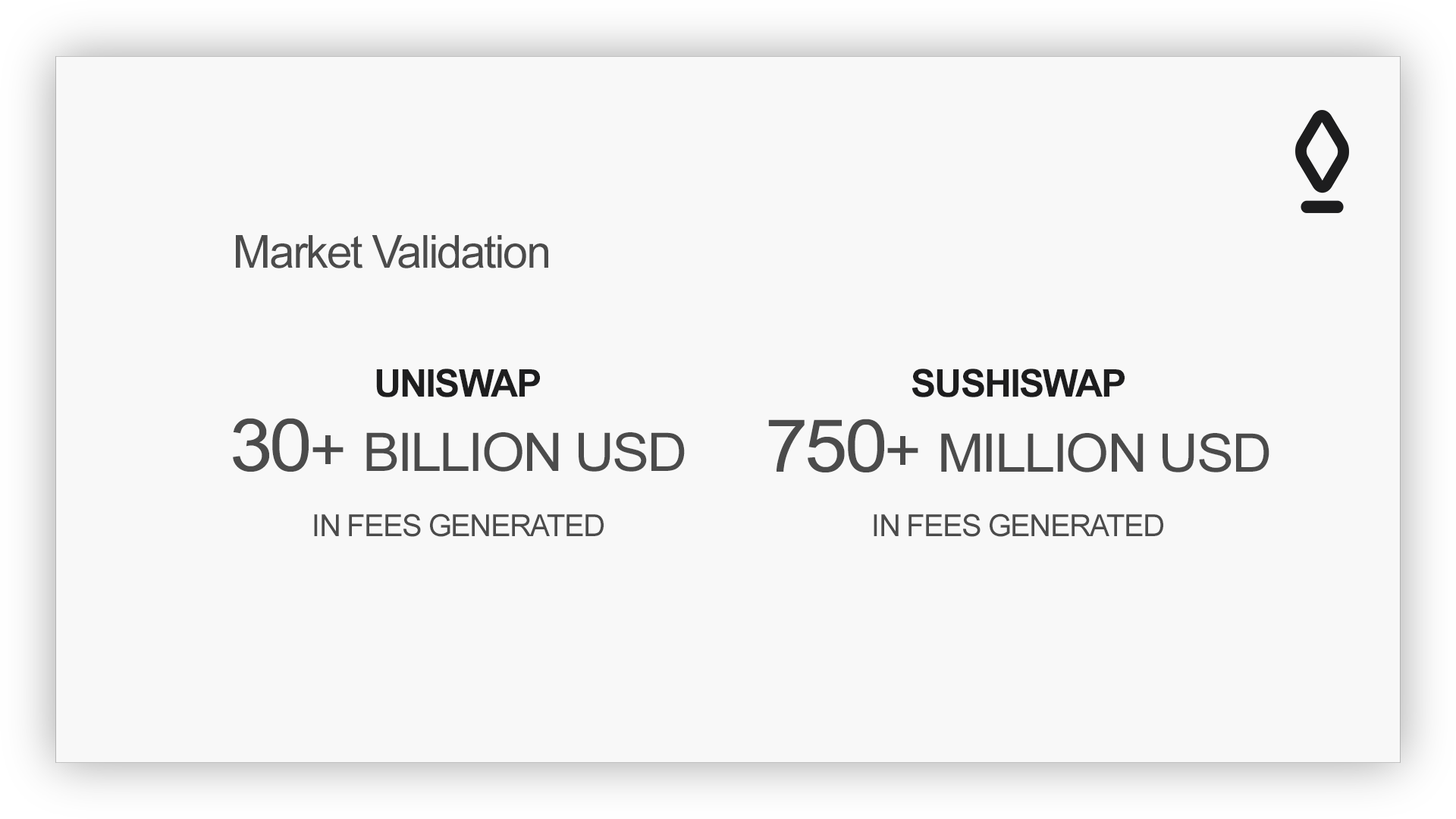
<style>
.page{position:relative;width:1456px;height:819px;background:#f8f8f8}
.page>*{position:absolute;margin:0}
.t1{font:45.5px "ArialMT";letter-spacing:-0.04em;color:#4b4b4b}
.t2{font:38.1px "Arial-BoldMT";letter-spacing:-0.04em;color:#1e1e1f}
.t3{font:38.1px "Arial-BoldMT";letter-spacing:-0.04em;color:#1d1d1e}
.t4{font:53.1px "ArialMT";letter-spacing:-0.04em;color:#4b4b4b;scale:1.05 1}
.t5{font:73.1px "ArialMT";letter-spacing:-0.04em;color:#4b4b4b;scale:1.05 1}
.t6{font:60.7px "ArialMT";letter-spacing:-0.04em;color:#4b4b4b;scale:1.05 1}
.t7{font:30.3px "ArialMT";letter-spacing:-0.04em;color:#4b4b4b}
</style>
<div class="page">
<p class="t1" style="left:236px;top:235px;width:312px;height:33px">Market Validation</p>
<p class="t2" style="left:376px;top:369px;width:164px;height:28px">UNISWAP</p>
<p class="t3" style="left:912px;top:369px;width:213px;height:28px">SUSHISWAP</p>
<p class="t4" style="left:233px;top:418px;width:452px;height:54px"><span class="t5">30</span><span class="t6">+ </span>BILLION USD</p>
<p class="t4" style="left:768px;top:419px;width:501px;height:53px"><span class="t5">750</span><span class="t6">+ </span>MILLION USD</p>
<p class="t7" style="left:314px;top:513px;width:290px;height:24px">IN FEES GENERATED</p>
<p class="t7" style="left:874px;top:513px;width:289px;height:24px">IN FEES GENERATED</p>
</div>
